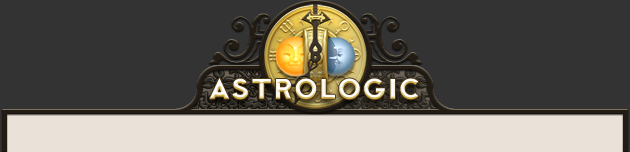
<style>
.page{position:relative;width:630px;height:152px;background:#333333}
.page>*{position:absolute;margin:0}
.t1{font:36px "Cityof"}
</style>
<div class="page">
<p class="t1" style="left:209px;top:78px;width:209px;height:22px">astrologic</p>
</div>
